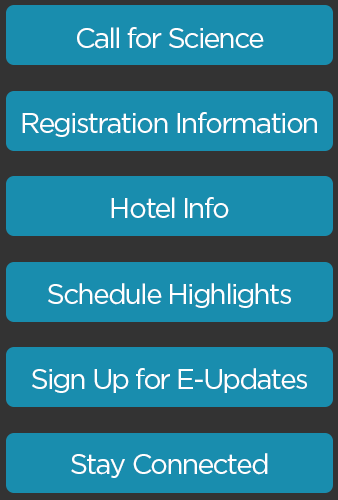
<style>
.page{position:relative;width:338px;height:500px;background:#198dae}
.page>*{position:absolute;margin:0}
.t1{font:28px "Gotham-Book";letter-spacing:-0.06em;color:#ffffff}
</style>
<div class="page">
<p class="t1" style="left:77px;top:27px;width:187px;height:22px">Call for Science</p>
<p class="t1" style="left:22px;top:112px;width:295px;height:25px">Registration Information</p>
<p class="t1" style="left:111px;top:197px;width:118px;height:21px">Hotel Info</p>
<p class="t1" style="left:48px;top:283px;width:243px;height:25px">Schedule Highlights</p>
<p class="t1" style="left:32px;top:368px;width:275px;height:25px">Sign Up for E-Updates</p>
<p class="t1" style="left:71px;top:453px;width:197px;height:25px">Stay Connected</p>
</div>
